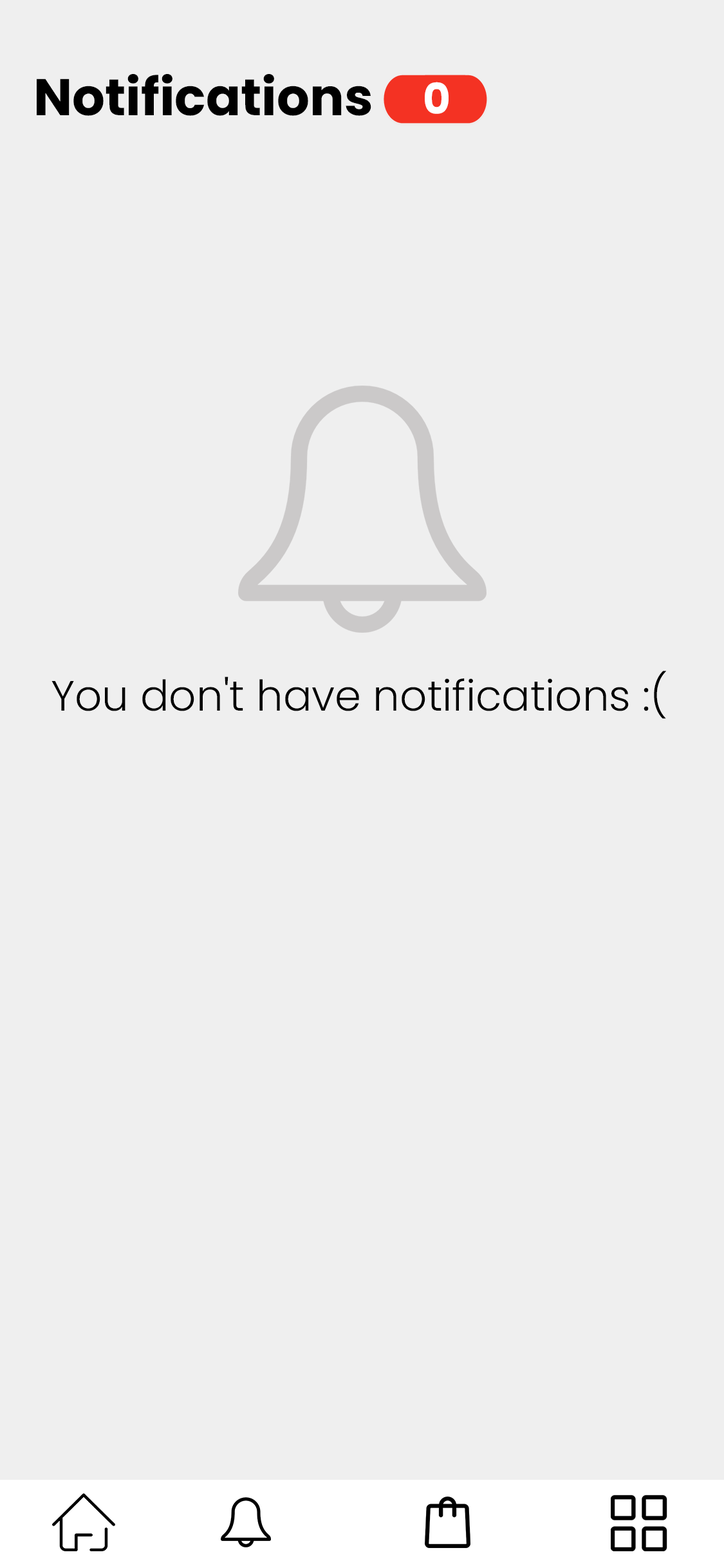
<style>
.page{position:relative;width:724px;height:1568px;background:#efefef}
.page>*{position:absolute;margin:0}
.t1{font:51.5px "Poppins-Bold";color:#000000}
.t2{font:42.5px "Poppins-Bold";color:#ffffff}
.t3{font:42.5px "Poppins-Light";color:#000000}
</style>
<div class="page">
<p class="t1" style="left:37px;top:74px;width:334px;height:42px">Notifications</p>
<p class="t2" style="left:425px;top:82px;width:24px;height:32px">0</p>
<p class="t3" style="left:51px;top:671px;width:615px;height:48px">You don't have notifications :(</p>
</div>
